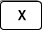
<style>
.page{position:relative;width:42px;height:30px;background:#ffffff}
.page>*{position:absolute;margin:0}
.t1{font:15px "SourceSansPro-Regular";color:#000000;text-transform:uppercase;font-weight:bold}
</style>
<div class="page">
<p class="t1" style="left:18px;top:10px;width:8px;height:11px">X</p>
</div>
